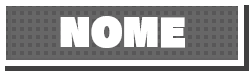
<style>
.page{position:relative;width:250px;height:72px;background:#676767}
.page>*{position:absolute;margin:0}
.t1{font:36px "RaglanPunchStd-UB";letter-spacing:0.007em;color:#ffffff}
</style>
<div class="page">
<p class="t1" style="left:60px;top:16px;width:125px;height:32px">NOME</p>
</div>
